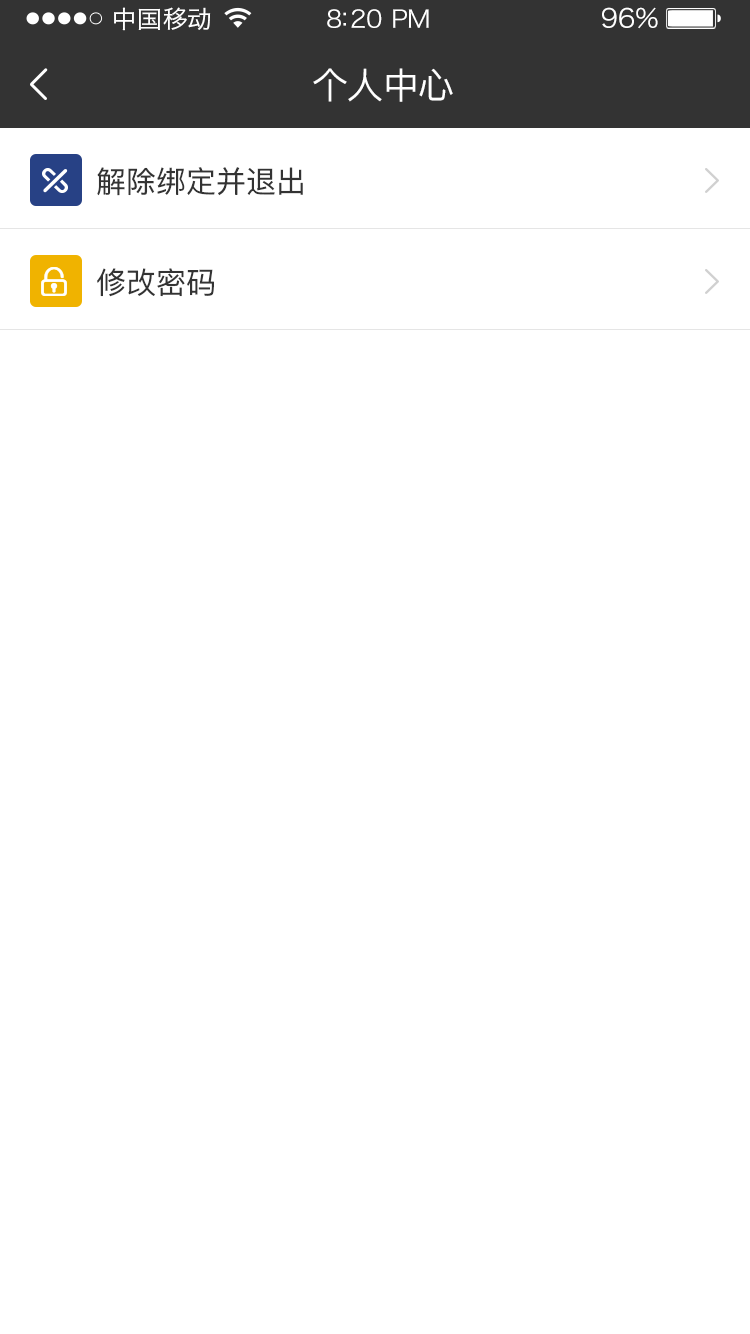
<style>
.page{position:relative;width:750px;height:1334px;background:#ffffff}
.page>*{position:absolute;margin:0}
.t1{font:24px "HiraginoSansGB-W3";letter-spacing:0.02em;color:#ffffff;scale:1.03 1}
.t2{font:24px "HiraginoSansGB-W3";letter-spacing:-0.02em;color:#ffffff;scale:1.03 1}
.t3{font:26.2px "HiraginoSansGB-W3";letter-spacing:-0.02em;color:#ffffff;scale:1.03 1}
.t4{font:36px "PingFangSC-Regular";letter-spacing:-0.02em;color:#ffffff}
.t5{font:30px "PingFangSC-Regular";color:#333333}
</style>
<div class="page">
<p class="t1" style="left:114px;top:7px;width:97px;height:24px">中国移动</p>
<p class="t2" style="left:327px;top:9px;width:102px;height:19px">8:20 PM</p>
<p class="t3" style="left:602px;top:7px;width:56px;height:22px">96%</p>
<p class="t4" style="left:313px;top:68px;width:140px;height:34px">个人中心</p>
<p class="t5" style="left:97px;top:167px;width:206px;height:29px">解除绑定并退出</p>
<p class="t5" style="left:97px;top:268px;width:117px;height:29px">修改密码</p>
</div>
